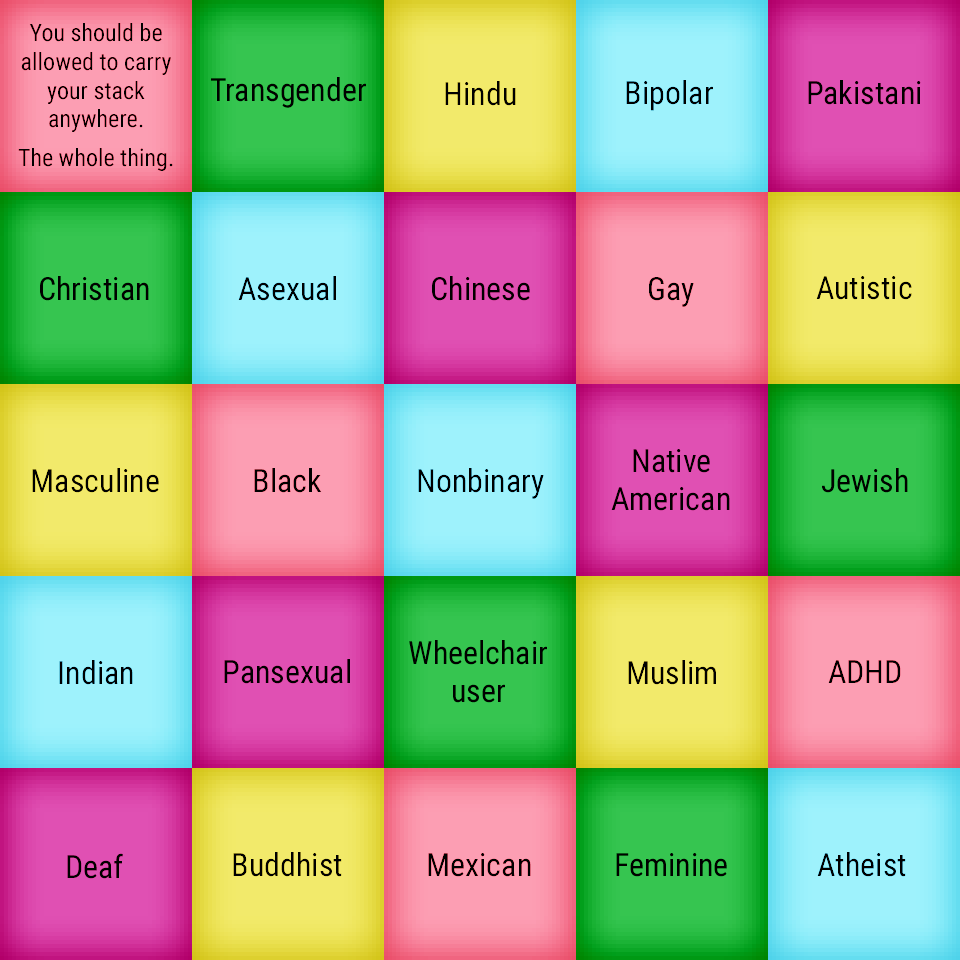
<style>
.page{position:relative;width:960px;height:960px}
.page>*{position:absolute;margin:0}
.t1{font:24px "RobotoCondensed-Regular";color:#000000}
.t2{font:32px "RobotoCondensed-Regular";color:#000000}
</style>
<div class="page">
<p class="t1" style="left:18px;top:23px;width:155px;height:148px;text-align:center">You should be allowed to carry your stack anywhere.<br> <br>The whole thing.</p>
<p class="t2" style="left:211px;top:77px;width:155px;height:31px">Transgender</p>
<p class="t2" style="left:445px;top:81px;width:71px;height:25px">Hindu</p>
<p class="t2" style="left:626px;top:80px;width:87px;height:31px">Bipolar</p>
<p class="t2" style="left:808px;top:80px;width:113px;height:25px">Pakistani</p>
<p class="t2" style="left:40px;top:276px;width:109px;height:25px">Christian</p>
<p class="t2" style="left:238px;top:276px;width:98px;height:25px">Asexual</p>
<p class="t2" style="left:432px;top:276px;width:98px;height:25px">Chinese</p>
<p class="t2" style="left:649px;top:277px;width:45px;height:30px">Gay</p>
<p class="t2" style="left:816px;top:276px;width:96px;height:24px">Autistic</p>
<p class="t2" style="left:611px;top:449px;width:119px;height:62px;text-align:center">Native<br>American</p>
<p class="t2" style="left:32px;top:468px;width:127px;height:25px">Masculine</p>
<p class="t2" style="left:254px;top:468px;width:68px;height:25px">Black</p>
<p class="t2" style="left:418px;top:468px;width:126px;height:31px">Nonbinary</p>
<p class="t2" style="left:822px;top:468px;width:86px;height:25px">Jewish</p>
<p class="t2" style="left:409px;top:640px;width:138px;height:63px;text-align:center">Wheelchair<br>user</p>
<p class="t2" style="left:59px;top:660px;width:74px;height:25px">Indian</p>
<p class="t2" style="left:224px;top:659px;width:126px;height:25px">Pansexual</p>
<p class="t2" style="left:628px;top:660px;width:88px;height:25px">Muslim</p>
<p class="t2" style="left:828px;top:660px;width:73px;height:23px">ADHD</p>
<p class="t2" style="left:67px;top:853px;width:56px;height:26px">Deaf</p>
<p class="t2" style="left:233px;top:852px;width:109px;height:25px">Buddhist</p>
<p class="t2" style="left:428px;top:853px;width:103px;height:24px">Mexican</p>
<p class="t2" style="left:616px;top:853px;width:111px;height:24px">Feminine</p>
<p class="t2" style="left:817px;top:852px;width:89px;height:25px">Atheist</p>
</div>
